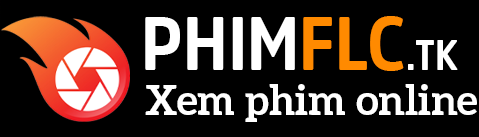
<style>
.page{position:relative;width:479px;height:137px;background:#000000}
.page>*{position:absolute;margin:0}
.t1{font:75px "SVN-AmsiNarwBold";color:#ffffff}
.t2{font:75px "SVN-AmsiNarwBold";color:#ff8a00}
.t3{font:41.7px "SVN-AmsiNarwBold";color:#ffffff}
.t4{font:41.7px "SVN-AleoBold";color:#ffffff}
</style>
<div class="page">
<p class="t1" style="left:145px;top:16px;width:313px;height:55px">PHIM<span class="t2">FLC</span><span class="t3">.TK</span></p>
<p class="t4" style="left:145px;top:84px;width:332px;height:38px">Xem phim online</p>
</div>
